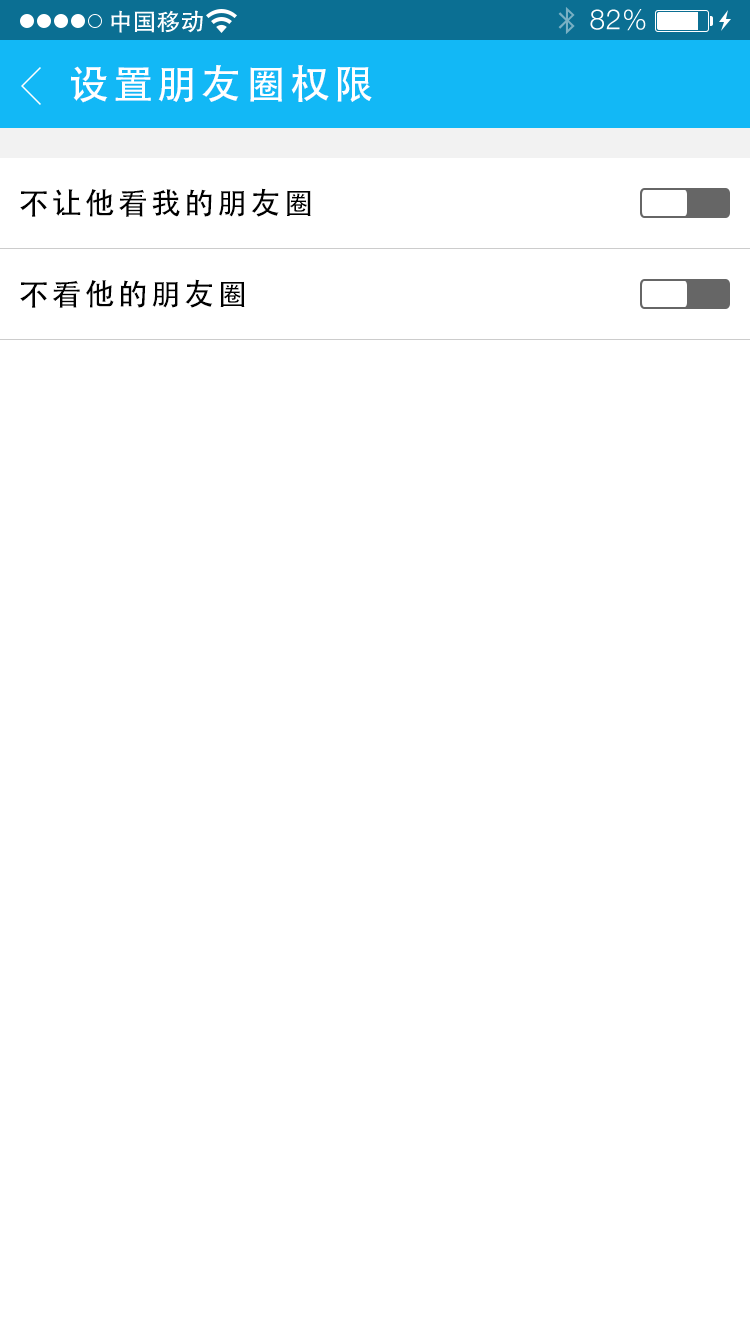
<style>
.page{position:relative;width:750px;height:1334px;background:#ffffff}
.page>*{position:absolute;margin:0}
.t1{font:40px "AdobeHeitiStd-Regular";letter-spacing:0.104em;color:#ffffff}
.t2{font:30px "AdobeHeitiStd-Regular";letter-spacing:0.104em;color:#000000}
</style>
<div class="page">
<p class="t1" style="left:71px;top:65px;width:301px;height:38px">设置朋友圈权限</p>
<p class="t2" style="left:20px;top:188px;width:291px;height:29px">不让他看我的朋友圈</p>
<p class="t2" style="left:20px;top:279px;width:225px;height:29px">不看他的朋友圈</p>
</div>
